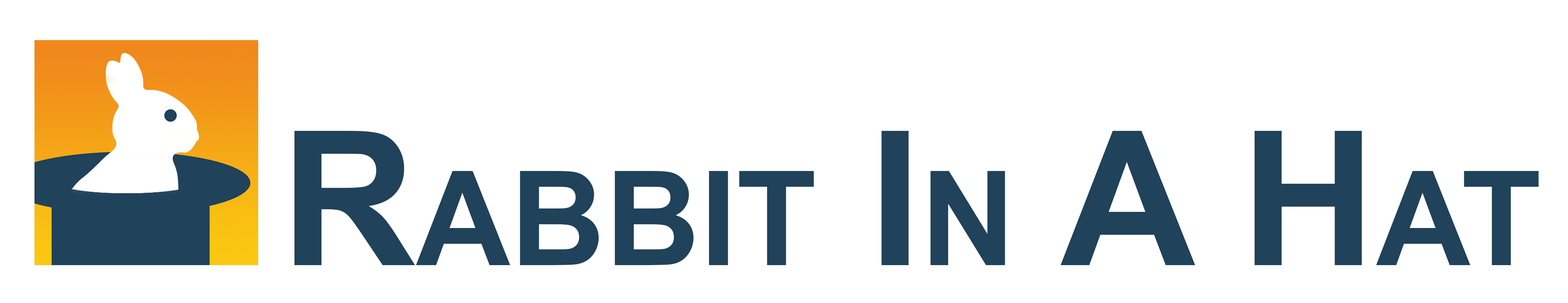
<style>
.page{position:relative;width:1568px;height:303px;background:#ffffff}
.page>*{position:absolute;margin:0}
.t1{font:187.4px "Arial-BoldMT";color:#20425a;font-variant:small-caps}
</style>
<div class="page">
<p class="t1" style="left:294px;top:130px;width:1245px;height:135px">Rabbit In A Hat</p>
</div>
